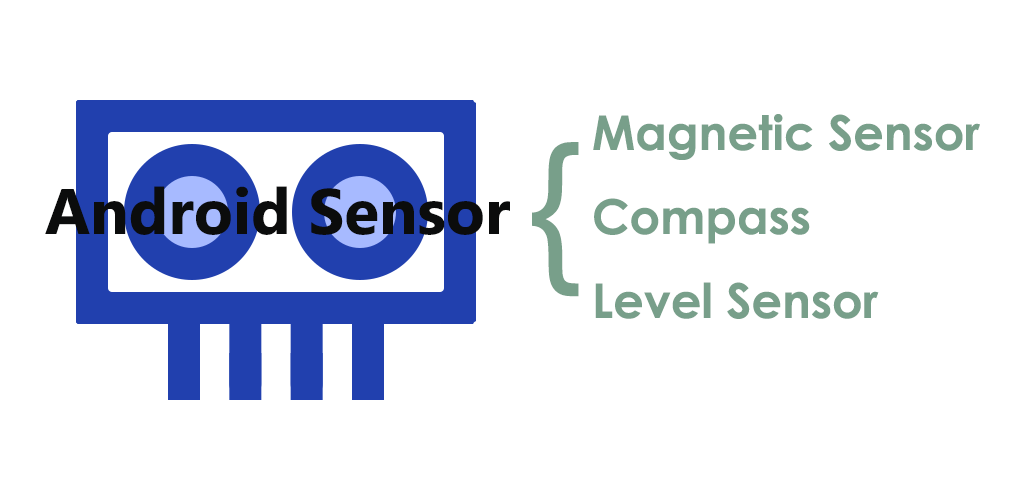
<style>
.page{position:relative;width:1024px;height:500px;background:#ffffff}
.page>*{position:absolute;margin:0}
.t1{font:48px "CenturyGothic-Bold";color:#789f8a}
.t2{font:164px "CenturyGothic";color:#789f8a}
.t3{font:64px "SegoeUI-Bold";color:#0b0c0c}
</style>
<div class="page">
<p class="t1" style="left:593px;top:114px;width:387px;height:205px">Magnetic Sensor<br>Compass<br>Level Sensor</p>
<p class="t2" style="left:532px;top:142px;width:47px;height:155px">{</p>
<p class="t3" style="left:45px;top:186px;width:465px;height:49px">Android Sensor</p>
</div>
